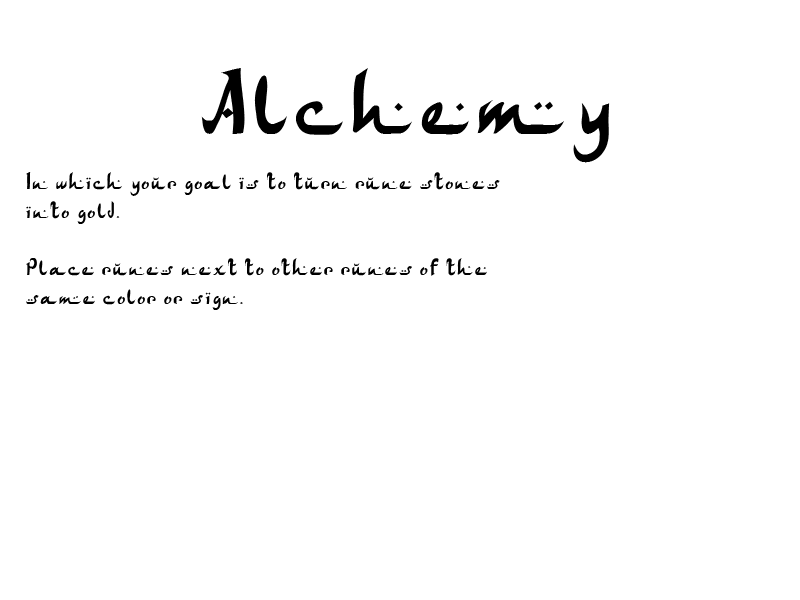
<style>
.page{position:relative;width:800px;height:600px;background:#ffffff}
.page>*{position:absolute;margin:0}
.t1{font:96px "ArabDancesMediumItalic";color:#000000}
.t2{font:24px "ArabDancesMediumItalic";color:#000000}
</style>
<div class="page">
<p class="t1" style="left:201px;top:68px;width:409px;height:95px">Alchemy</p>
<p class="t2" style="left:26px;top:172px;width:474px;height:138px">In which your goal is to turn rune stones into gold.<br><br>Place runes next to other runes of the same color or sign.</p>
</div>
